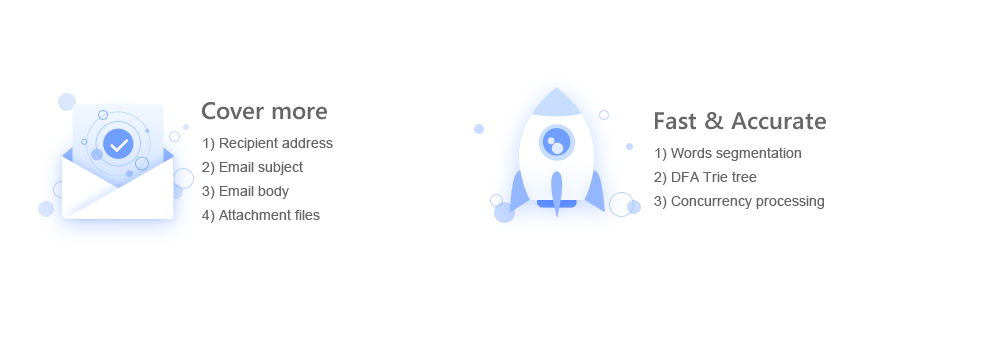
<style>
.page{position:relative;width:1000px;height:360px;background:#ffffff}
.page>*{position:absolute;margin:0}
.t1{font:24px "SegoeUI-SemiBold";color:#666666}
.t2{font:14px/24px "ArialMT";color:#666666}
</style>
<div class="page">
<p class="t1" style="left:202px;top:102px;width:125px;height:18px">Cover more</p>
<p class="t1" style="left:655px;top:112px;width:171px;height:18px">Fast &amp; Accurate</p>
<p class="t2" style="left:202px;top:137px;width:131px;height:86px">1) Recipient address<br>2) Email subject<br>3) Email body<br>4) Attachment files</p>
<p class="t2" style="left:654px;top:147px;width:170px;height:62px">1) Words segmentation<br>2) DFA Trie tree<br>3) Concurrency processing</p>
</div>
